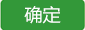
<style>
.page{position:relative;width:85px;height:30px;background:#339839}
.page>*{position:absolute;margin:0}
.t1{font:18px "MicrosoftYaHeiUI";color:#ffffff}
</style>
<div class="page">
<p class="t1" style="left:24px;top:6px;width:37px;height:18px">确定</p>
</div>
